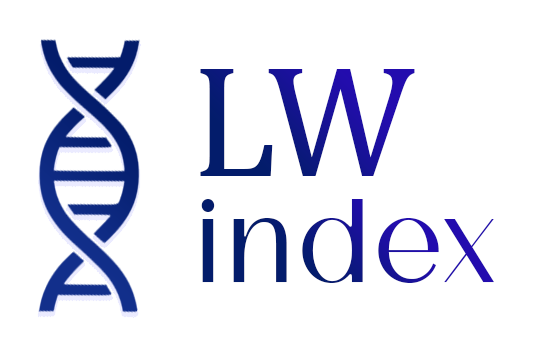
<style>
.page{position:relative;width:534px;height:358px;background:#ffffff}
.page>*{position:absolute;margin:0}
.t1{font:160px "CambriaMath"}
.t2{font:157px "BreadleySans-Regular"}
</style>
<div class="page">
<p class="t1" style="left:200px;top:69px;width:215px;height:107px">LW</p>
<p class="t2" style="left:201px;top:199px;width:293px;height:84px">index</p>
</div>
